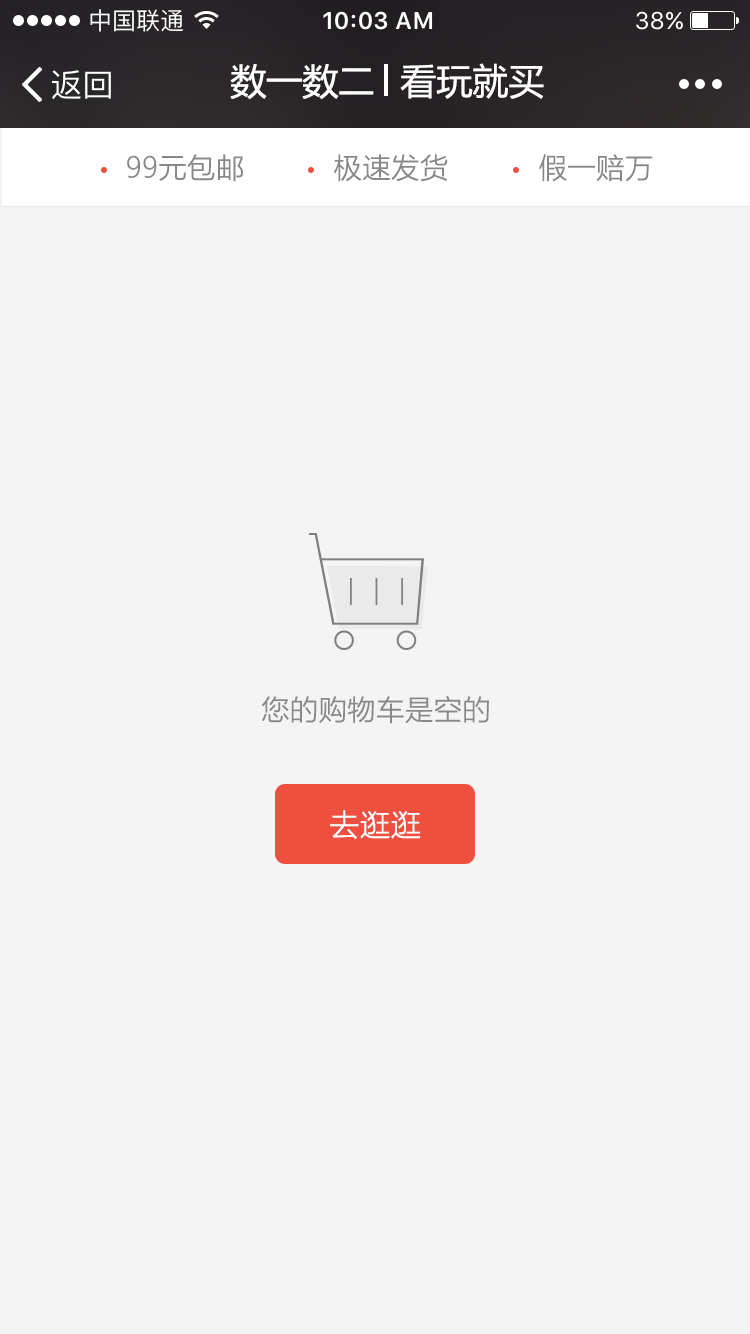
<style>
.page{position:relative;width:750px;height:1334px;background:#f4f4f4}
.page>*{position:absolute;margin:0}
.t1{font:36px "MicrosoftYaHei";color:#ffffff}
.t2{font:28px "MicrosoftYaHeiLight";color:#888888;font-weight:bold}
.t3{font:30px "MicrosoftYaHeiLight";color:#ffffff;font-weight:bold}
</style>
<div class="page">
<p class="t1" style="left:230px;top:63px;width:144px;height:37px">数一数二</p>
<p class="t1" style="left:400px;top:63px;width:144px;height:36px">看玩就买</p>
<p class="t2" style="left:127px;top:154px;width:116px;height:28px">99元包邮</p>
<p class="t2" style="left:334px;top:154px;width:114px;height:28px">极速发货</p>
<p class="t2" style="left:539px;top:154px;width:114px;height:28px">假一赔万</p>
<p class="t2" style="left:261px;top:696px;width:228px;height:28px">您的购物车是空的</p>
<p class="t3" style="left:330px;top:810px;width:91px;height:29px">去逛逛</p>
</div>
